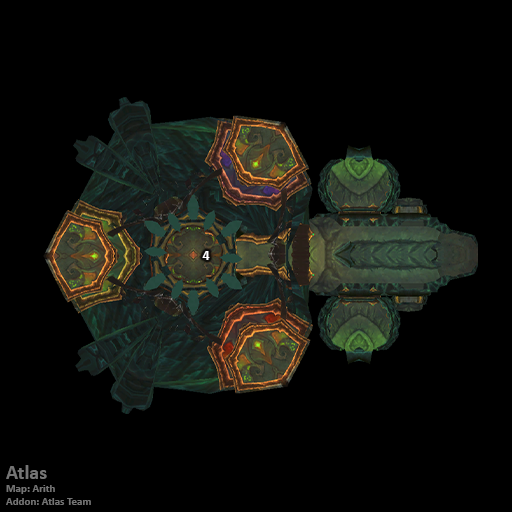
<style>
.page{position:relative;width:512px;height:512px;background:#000000}
.page>*{position:absolute;margin:0}
.t1{font:14px "Calibri-Bold";color:#ffffff}
.t2{font:11px "Calibri-Bold";color:#747474}
.t3{font:20px "Calibri-Bold";color:#747474}
</style>
<div class="page">
<p class="t1" style="left:202px;top:251px;width:8px;height:9px">4</p>
<p class="t2" style="left:6px;top:465px;width:85px;height:40px"><span class="t3">Atlas<br></span>Map: Arith<br>Addon: Atlas Team</p>
</div>
